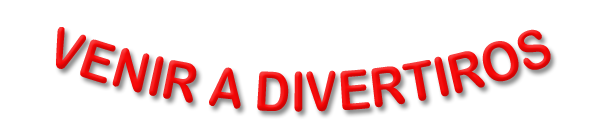
<style>
.page{position:relative;width:609px;height:140px;background:#ffffff}
.page>*{position:absolute;margin:0}
.t1{font:55px "ArialRoundedMTBold";scale:0.82 1}
</style>
<div class="page">
<p class="t1" style="left:56px;top:27px;width:495px;height:85px">VENIR A DIVERTIROS</p>
</div>
